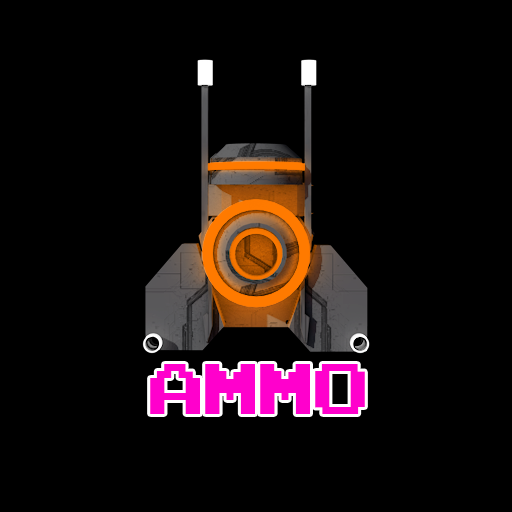
<style>
.page{position:relative;width:512px;height:512px;background:#000000}
.page>*{position:absolute;margin:0}
.t1{font:100px "ArcadeClassic";color:#ff00cc}
</style>
<div class="page">
<p class="t1" style="left:150px;top:364px;width:215px;height:50px">Ammo</p>
</div>
